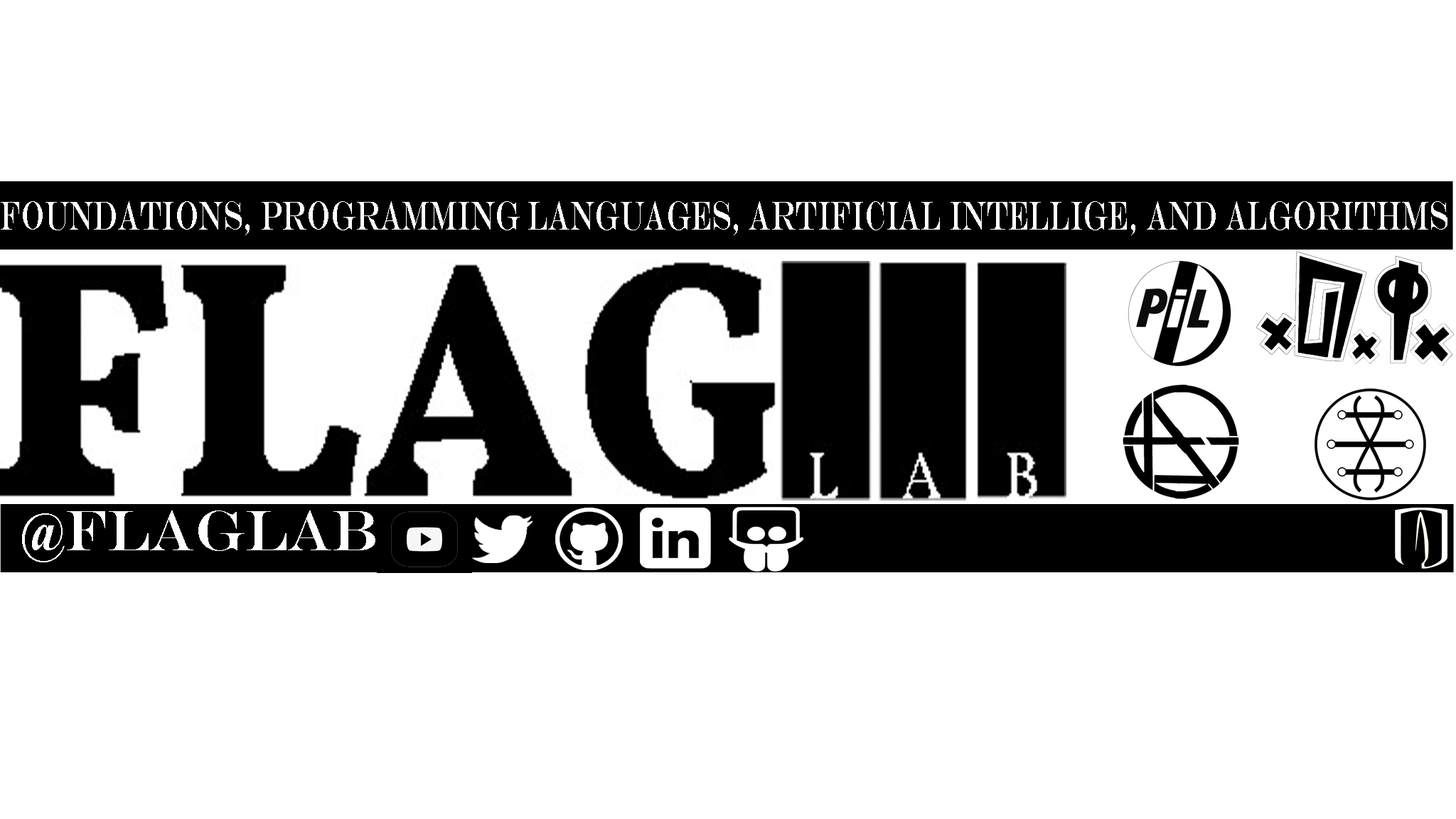
<style>
.page{position:relative;width:1456px;height:819px;background:#ffffff}
.page>*{position:absolute;margin:0}
.t1{font:40.6px "EngraversMT";color:#ffffff;scale:0.61 1}
.t2{font:57px "EngraversMT";color:#ffffff;scale:0.9 1}
</style>
<div class="page">
<p class="t1" style="left:1px;top:201px;width:1446px;height:34px">Foundations, Programming languages, Artificial intellige, and algorithms</p>
<p class="t2" style="left:22px;top:510px;width:353px;height:52px">@FLAGlab</p>
</div>
